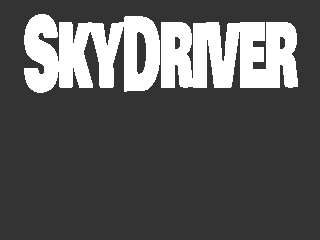
<style>
.page{position:relative;width:320px;height:240px;background:#333333}
.page>*{position:absolute;margin:0}
.t1{font:100px "BowlbyOneSC-Regular";letter-spacing:-0.05em;color:#ffffff;scale:0.5 1}
</style>
<div class="page">
<p class="t1" style="left:24px;top:14px;width:274px;height:79px">SkyDriver</p>
</div>
